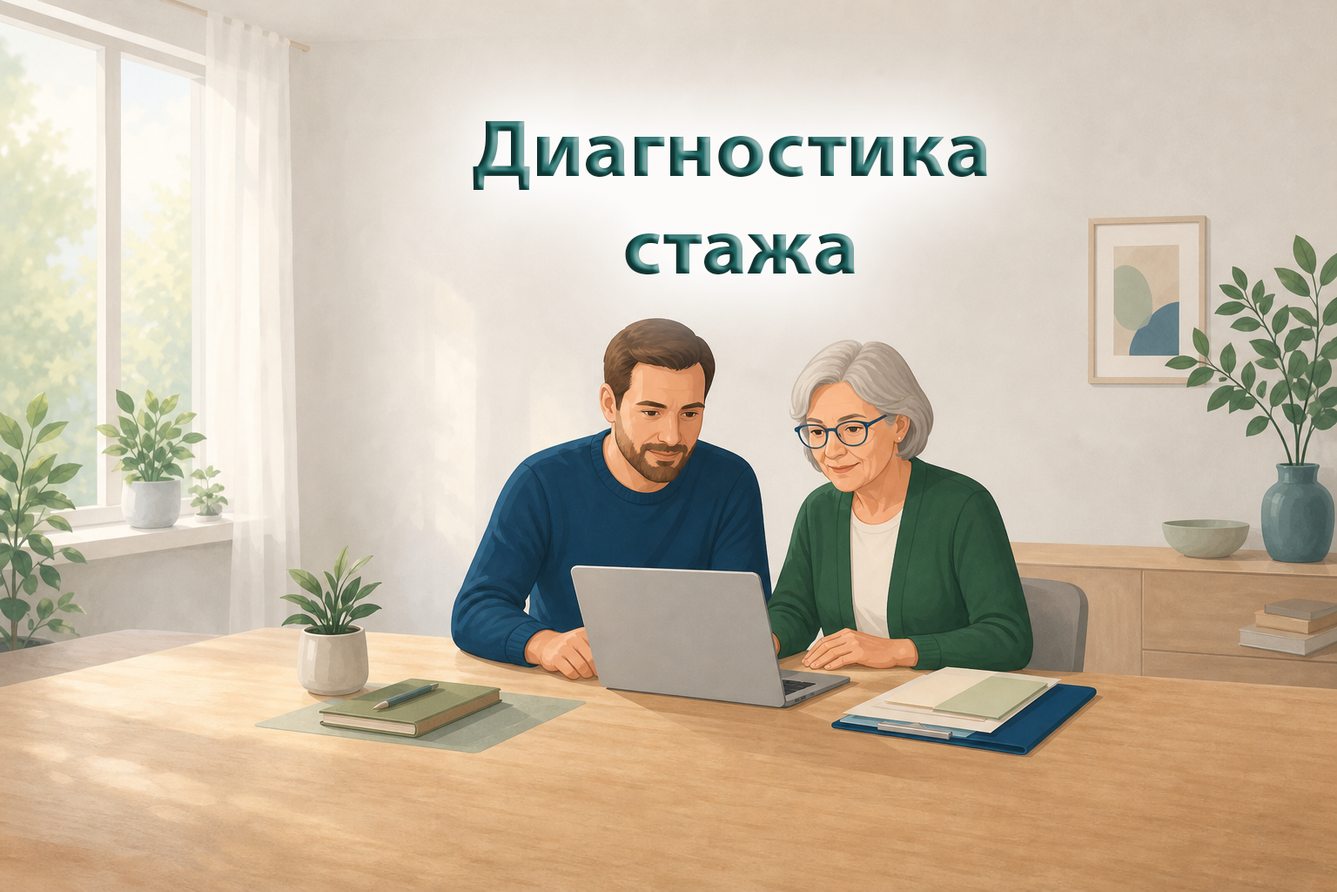
<style>
.page{position:relative;width:1337px;height:892px}
.page>*{position:absolute;margin:0}
.t1{font:81.5px "MyriadPro-Bold";scale:1.07 1}
</style>
<div class="page">
<p class="t1" style="left:473px;top:121px;width:514px;height:154px;text-align:center">Диагностика <br>стажа</p>
</div>
